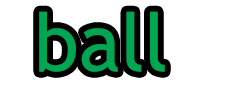
<style>
.page{position:relative;width:239px;height:108px;background:#ffffff}
.page>*{position:absolute;margin:0}
.t1{font:80px "TrebuchetMS";color:#00a651}
</style>
<div class="page">
<p class="t1" style="left:39px;top:11px;width:126px;height:61px">ball</p>
</div>
